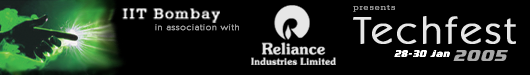
<style>
.page{position:relative;width:530px;height:75px;background:#000000}
.page>*{position:absolute;margin:0}
.t1{font:8.5px "SerifaBT-Roman";letter-spacing:0.1em;color:#9b9b9b;scale:1.09 1}
.t2{font:37.8px "KabelITCbyBT-Book";letter-spacing:0.085em;color:#e7e7e7;font-weight:bold;scale:1.07 1}
.t3{font:8.5px "KabelITCbyBT-Book";letter-spacing:0.085em;color:#989898;font-weight:bold;scale:1.07 1}
.t4{font:9.4px "InfiniteJustice";letter-spacing:0.085em;color:#ffffff;scale:0.93 1}
.t5{font:15.7px "InfiniteJustice";letter-spacing:0.085em;color:#a8a8a8;scale:1.07 1}
</style>
<div class="page">
<p class="t1" style="left:353px;top:5px;width:42px;height:7px">presents</p>
<p class="t2" style="left:353px;top:16px;width:163px;height:28px">Techfest</p>
<p class="t3" style="left:155px;top:24px;width:84px;height:7px">in association with</p>
<p class="t4" style="left:394px;top:50px;width:56px;height:7px">28-30 Jan</p>
<p class="t5" style="left:453px;top:50px;width:55px;height:11px">2005</p>
</div>
